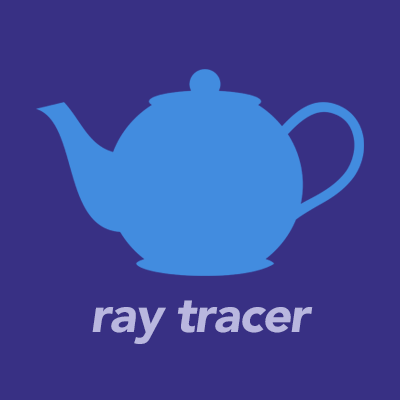
<style>
.page{position:relative;width:400px;height:400px;background:#383084}
.page>*{position:absolute;margin:0}
.t1{font:12px "Avenir-BlackOblique";letter-spacing:-0.025em;color:#b9b7df}
</style>
<div class="page">
<p class="t1" style="left:92px;top:300px;width:221px;height:44px;text-align:center">ray tracer</p>
</div>
